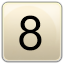
<style>
.page{position:relative;width:64px;height:64px}
.page>*{position:absolute;margin:0}
.t1{font:48px "ArialMT";color:#000000}
</style>
<div class="page">
<p class="t1" style="left:19px;top:15px;width:23px;height:36px">8</p>
</div>
